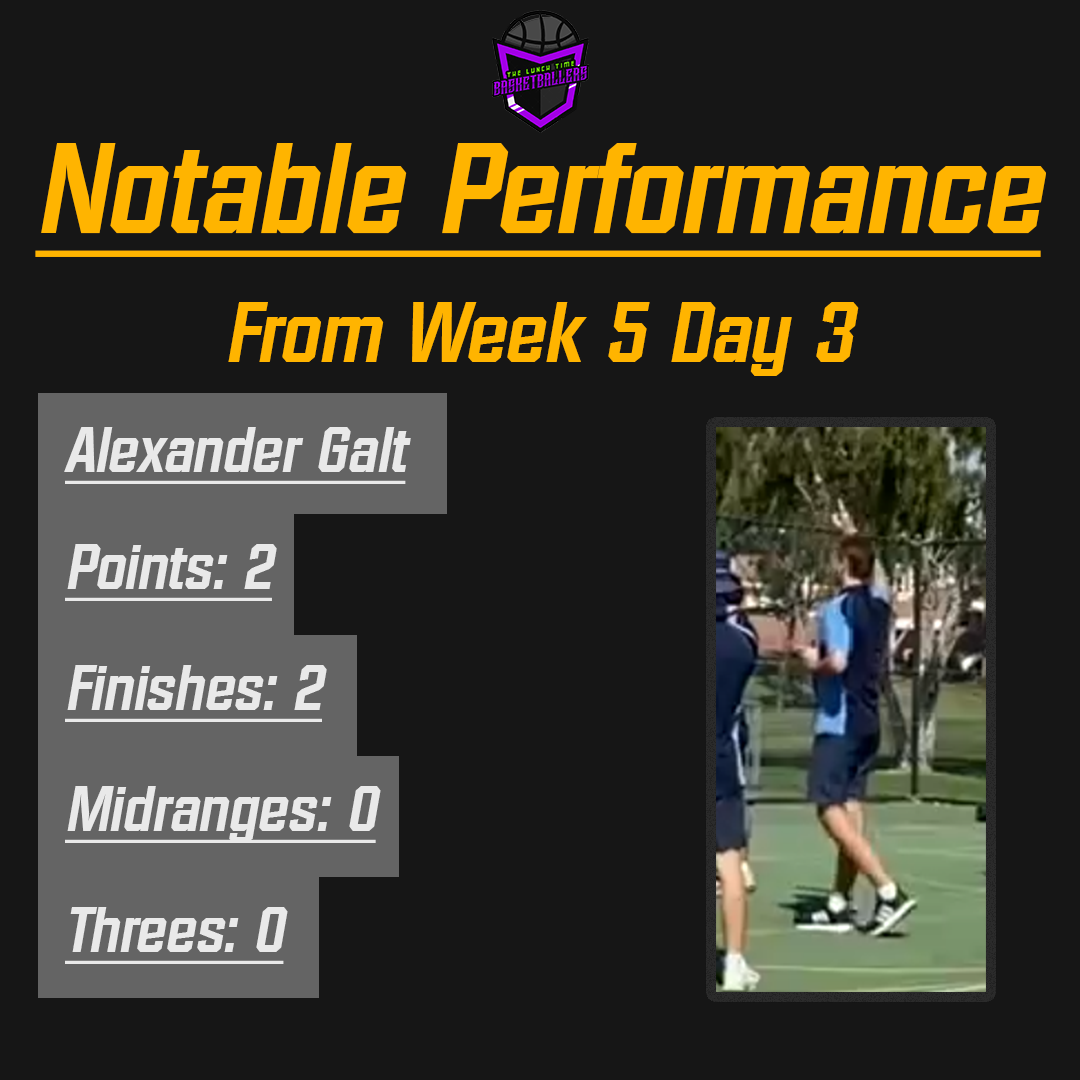
<style>
.page{position:relative;width:1080px;height:1080px;background:#161616}
.page>*{position:absolute;margin:0}
.t1{font:125px/129.2px "Diamante-Serial-BoldItalic";color:#ffb400;text-decoration:underline}
.t2{font:83.3px/129.2px "Diamante-Serial-BoldItalic";color:#ffb400}
.t3{font:62.5px "Diamante-Serial-BoldItalic";color:#e9e9e9;text-decoration:underline}
</style>
<div class="page">
<p class="t1" style="left:35px;top:143px;width:1011px;height:233px;text-align:center">Notable Performance<br><span class="t2">From Week 5 Day 3</span></p>
<p class="t3" style="left:64px;top:427px;width:347px;height:57px">Alexander Galt</p>
<p class="t3" style="left:65px;top:544px;width:212px;height:57px">Points: 2</p>
<p class="t3" style="left:65px;top:665px;width:262px;height:57px">Finishes: 2</p>
<p class="t3" style="left:65px;top:786px;width:316px;height:57px">Midranges: 0</p>
<p class="t3" style="left:65px;top:907px;width:223px;height:57px">Threes: 0</p>
</div>
